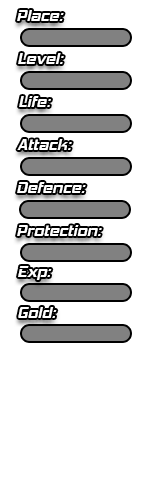
<style>
.page{position:relative;width:149px;height:480px;background:#ffffff}
.page>*{position:absolute;margin:0}
.t1{font:15.8px "HemiHeadRg-BoldItalic";color:#ffffff}
</style>
<div class="page">
<p class="t1" style="left:17px;top:10px;width:47px;height:11px">Place:</p>
<p class="t1" style="left:18px;top:53px;width:46px;height:11px">Level:</p>
<p class="t1" style="left:19px;top:96px;width:32px;height:11px">Life:</p>
<p class="t1" style="left:17px;top:139px;width:55px;height:11px">Attack:</p>
<p class="t1" style="left:17px;top:182px;width:69px;height:11px">Defence:</p>
<p class="t1" style="left:17px;top:225px;width:85px;height:11px">Protection:</p>
<p class="t1" style="left:18px;top:266px;width:34px;height:14px">Exp:</p>
<p class="t1" style="left:18px;top:307px;width:39px;height:11px">Gold:</p>
</div>
